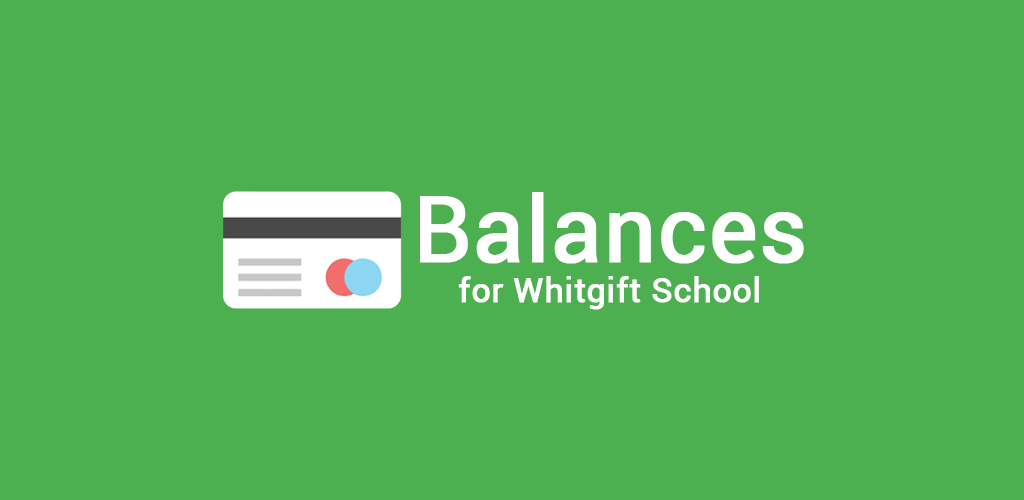
<style>
.page{position:relative;width:1024px;height:500px;background:#4caf50}
.page>*{position:absolute;margin:0}
.t1{font:34px "Roboto-Regular";color:#ffffff;font-weight:bold}
.t2{font:91px "Roboto-Regular";color:#ffffff;font-weight:bold}
</style>
<div class="page">
<p class="t1" style="left:420px;top:192px;width:384px;height:118px;text-align:center"><span class="t2">Balances<br></span>for Whitgift School</p>
</div>
